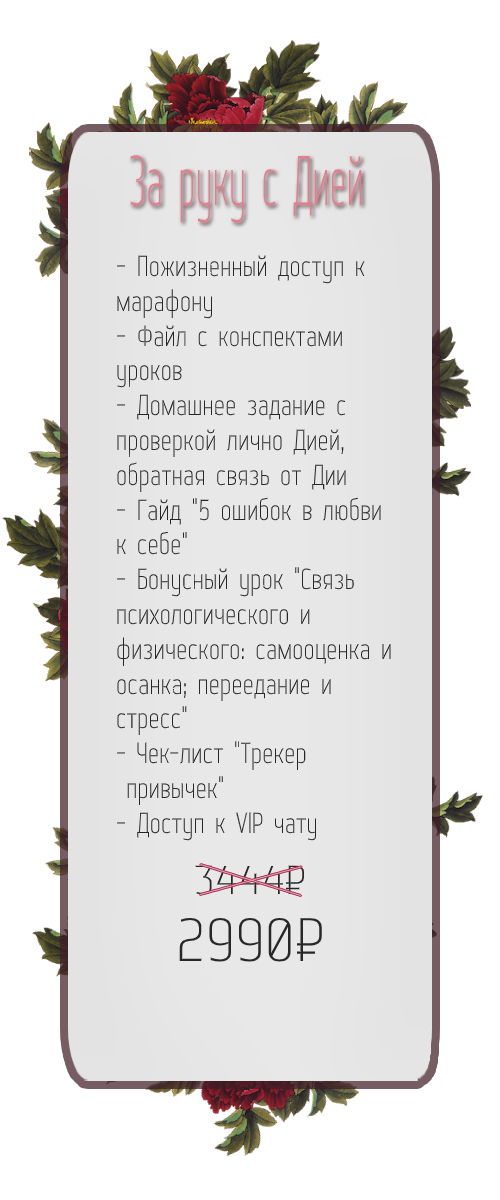
<style>
.page{position:relative;width:500px;height:1200px;background:#ffffff}
.page>*{position:absolute;margin:0}
.t1{font:70.1px "WebServeroff";color:#de8090;scale:0.63 1}
.t2{font:29px "WebServeroff";color:#272727}
.t3{font:40.4px "WebServeroff";color:#272727;scale:1.28 1}
.t4{font:61.2px "WebServeroff";color:#272727;scale:1.15 1}
</style>
<div class="page">
<p class="t1" style="left:130px;top:155px;width:232px;height:68px">За руку с Дией</p>
<p class="t2" style="left:117px;top:255px;width:274px;height:586px">- Пожизненный доступ к<br>марафону<br>- Файл с конспектами <br>уроков<br>- Домашнее задание с<br>проверкой лично Дией, <br>обратная связь от Дии<br>- Гайд "5 ошибок в любви<br>к себе"<br>- Бонусный урок "Связь<br>психологического и <br>физического: самооценка и<br>осанка; переедание и <br>стресс"<br>- Чек-лист "Трекер<br> привычек"<br>- Доступ к VIP чату</p>
<p class="t3" style="left:195px;top:865px;width:109px;height:30px">3444₽</p>
<p class="t4" style="left:179px;top:918px;width:143px;height:44px">2990₽</p>
</div>
